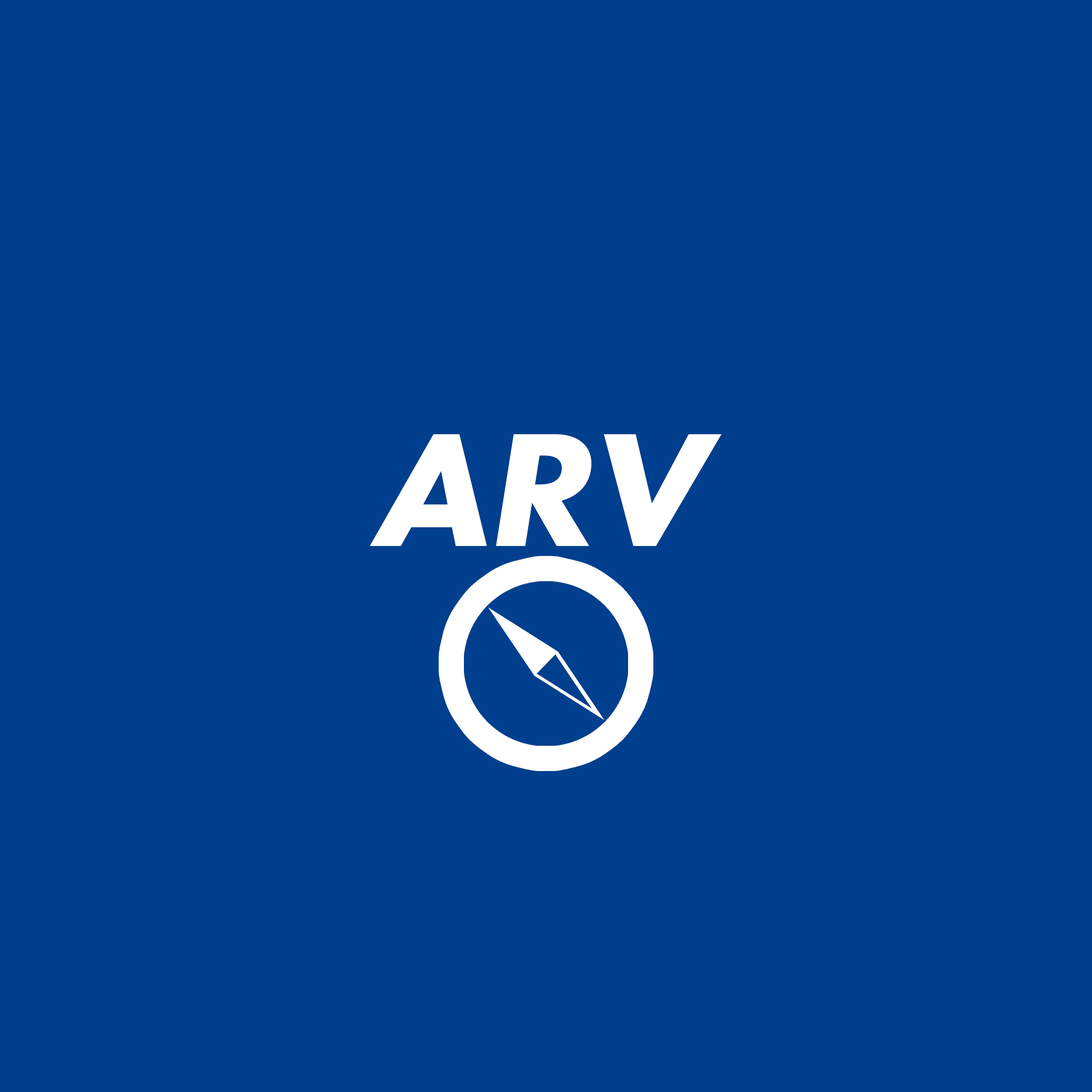
<style>
.page{position:relative;width:1092px;height:1092px;background:#003f8d}
.page>*{position:absolute;margin:0}
.t1{font:148.4px "LuzSans-BoldItalic";color:#ffffff}
</style>
<div class="page">
<p class="t1" style="left:369px;top:434px;width:353px;height:112px">ARV</p>
</div>
